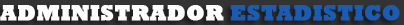
<style>
.page{position:relative;width:404px;height:25px;background:#fffefe}
.page>*{position:absolute;margin:0}
.t1{font:21.5px "Rockwell-ExtraBold";color:#fffefe;text-transform:uppercase;font-weight:bold}
.t2{font:21.5px "Rockwell-ExtraBold";color:#1b5bb2;text-transform:uppercase;font-weight:bold}
</style>
<div class="page">
<p class="t1" style="left:0px;top:5px;width:400px;height:16px">ADMINISTRADOR <span class="t2">ESTADISTICO</span></p>
</div>
